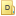
<style>
.page{position:relative;width:16px;height:16px;background:#ffffff}
.page>*{position:absolute;margin:0}
.t1{font:7px "ArialMT";letter-spacing:0.05em;color:#505050}
</style>
<div class="page">
<p class="t1" style="left:5px;top:5px;width:5px;height:5px">D</p>
</div>
